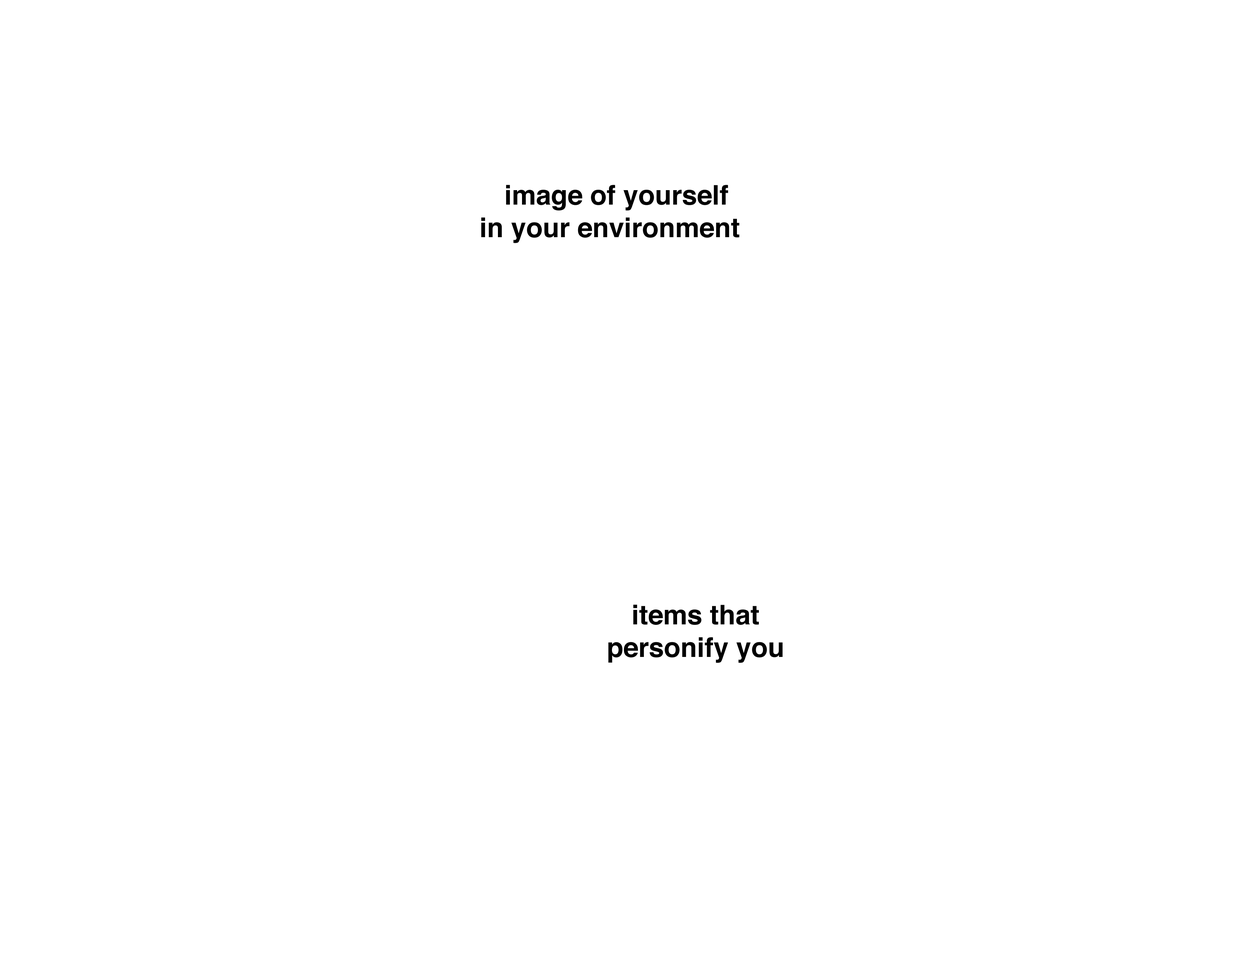
<style>
.page{position:relative;width:1242px;height:960px;background:#ffffff}
.page>*{position:absolute;margin:0}
.t1{font:27.1px "Helvetica-Bold";color:#000000}
</style>
<div class="page">
<p class="t1" style="left:481px;top:185px;width:259px;height:58px;text-align:center">image of yourself<br>in your environment</p>
<p class="t1" style="left:608px;top:605px;width:175px;height:58px;text-align:center">items that<br>personify you</p>
</div>
